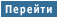
<style>
.page{position:relative;width:58px;height:18px;background:#336e99}
.page>*{position:absolute;margin:0}
.t1{font:11px "Verdana-Bold";letter-spacing:0.1em;color:#ffffff;scale:0.8 1}
</style>
<div class="page">
<p class="t1" style="left:5px;top:4px;width:47px;height:12px">Перейти</p>
</div>
